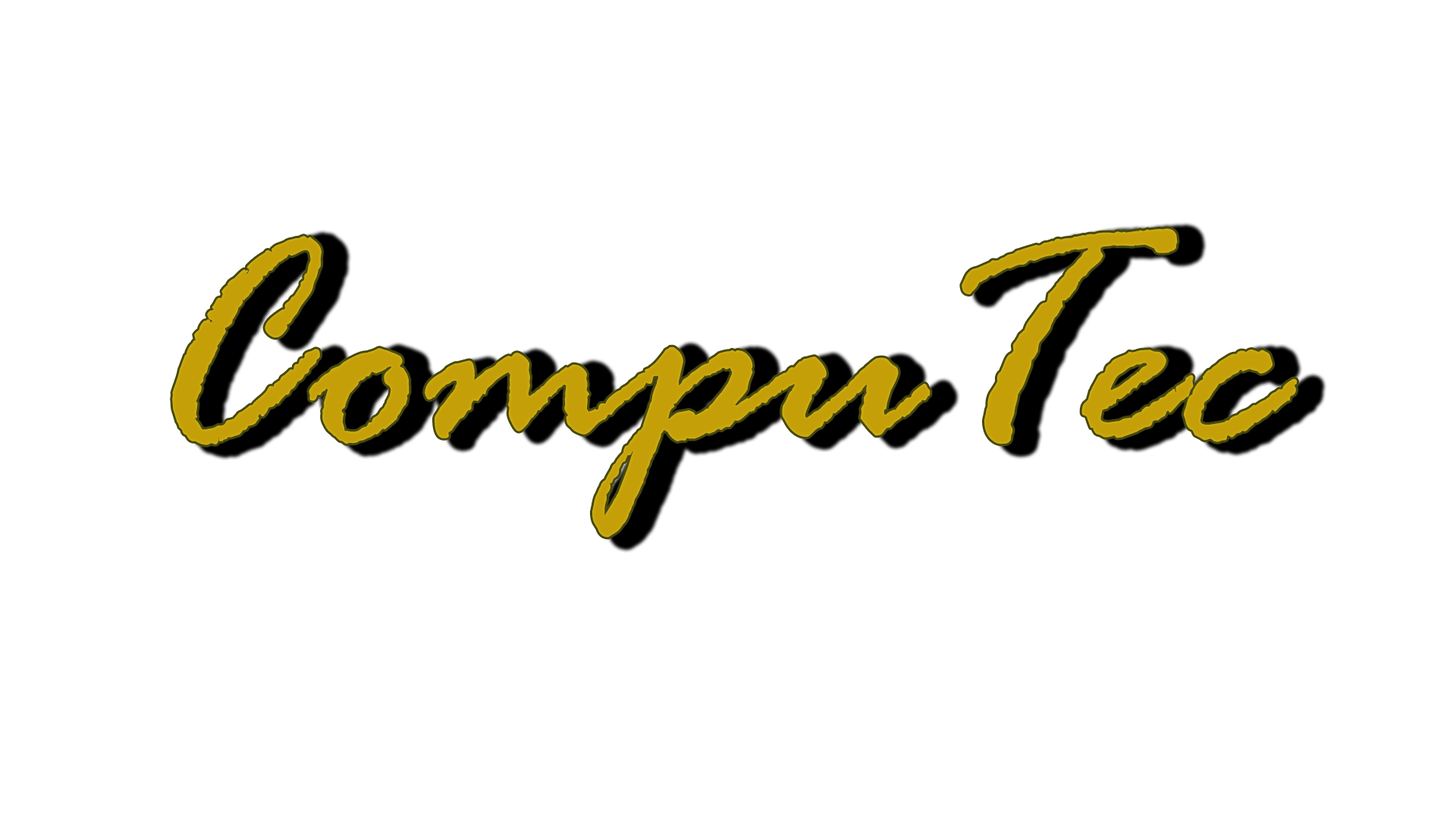
<style>
.page{position:relative;width:1456px;height:819px;background:#ffffff}
.page>*{position:absolute;margin:0}
.t1{font:316px "RageItalic";color:#c59f08}
</style>
<div class="page">
<p class="t1" style="left:172px;top:228px;width:1125px;height:310px">CompuTec</p>
</div>
